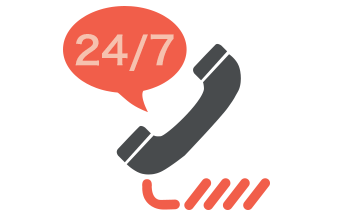
<style>
.page{position:relative;width:343px;height:224px;background:#ffffff}
.page>*{position:absolute;margin:0}
.t1{font:38.6px "HiraginoSansGB-W6";color:#f6c1ae}
</style>
<div class="page">
<p class="t1" style="left:75px;top:34px;width:99px;height:37px">24/7</p>
</div>
